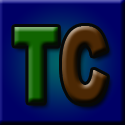
<style>
.page{position:relative;width:125px;height:125px}
.page>*{position:absolute;margin:0}
.t1{font:104.1px "Arial-Black";font-weight:bold;scale:0.6 1}
</style>
<div class="page">
<p class="t1" style="left:14px;top:26px;width:93px;height:78px">TC</p>
</div>
